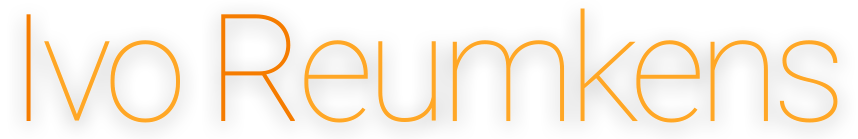
<style>
.page{position:relative;width:858px;height:139px;background:#ffffff}
.page>*{position:absolute;margin:0}
.t1{font:150px "Roboto-Thin";letter-spacing:-0.05em;color:#ffa726}
.t2{font:150px "Roboto-Thin";letter-spacing:-0.05em;color:#f57c00}
</style>
<div class="page">
<p class="t1" style="left:26px;top:8px;width:812px;height:115px"><span class="t2">I</span>vo <span class="t2">R</span>eumkens</p>
</div>
